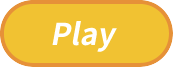
<style>
.page{position:relative;width:173px;height:67px;background:#f1c232}
.page>*{position:absolute;margin:0}
.t1{font:30px "NotoSansKR-Bold";color:#ffffff;font-style:italic}
</style>
<div class="page">
<p class="t1" style="left:52px;top:21px;width:65px;height:31px">Play</p>
</div>
